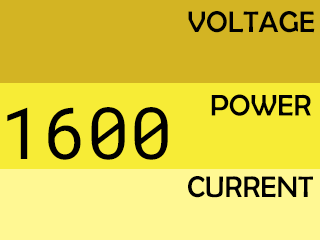
<style>
.page{position:relative;width:320px;height:240px;background:#d3b423}
.page>*{position:absolute;margin:0}
.t1{font:30px "BerlinSansFB-Reg";color:#000000}
.t2{font:72px "RobotoMono-Regular";color:#000000}
</style>
<div class="page">
<p class="t1" style="left:188px;top:11px;width:127px;height:22px">VOLTAGE</p>
<p class="t1" style="left:211px;top:94px;width:100px;height:22px">POWER</p>
<p class="t2" style="left:7px;top:107px;width:161px;height:53px">1600</p>
<p class="t1" style="left:188px;top:176px;width:125px;height:22px">CURRENT</p>
</div>
